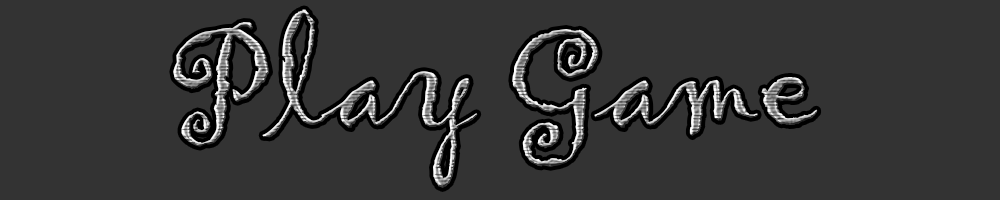
<style>
.page{position:relative;width:1000px;height:200px;background:#333333}
.page>*{position:absolute;margin:0}
.t1{font:148.2px "Gigi-Regular"}
</style>
<div class="page">
<p class="t1" style="left:173px;top:9px;width:645px;height:179px">Play Game</p>
</div>
